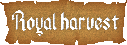
<style>
.page{position:relative;width:127px;height:45px;background:#ffffff}
.page>*{position:absolute;margin:0}
.t1{font:23px "Ancient-Modern-Tales";color:#ffffff}
</style>
<div class="page">
<p class="t1" style="left:12px;top:10px;width:107px;height:26px">Royal harvest</p>
</div>
